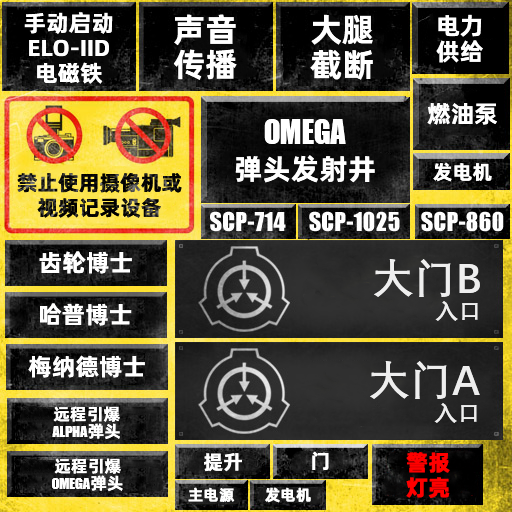
<style>
.page{position:relative;width:512px;height:512px}
.page>*{position:absolute;margin:0}
.t1{font:23px/25px "AlibabaPuHuiTiB";color:#ffffff}
.t2{font:33px/35px "AlibabaPuHuiTiB";color:#ffffff}
.t3{font:24px/26px "AlibabaPuHuiTiB";color:#ffffff}
.t4{font:24px "AlibabaPuHuiTiB";color:#ffffff}
.t5{font:36px/40px "URWImpactW01-Bold";color:#ffffff}
.t6{font:29px/40px "AlibabaPuHuiTiB";color:#ffffff}
.t7{font:21px/25px "AlibabaPuHuiTiB";color:#0c0c0c}
.t8{font:20px "AlibabaPuHuiTiB";color:#ffffff}
.t9{font:42px/42px "DengXian-Bold";color:#eeeeee}
.t10{font:23px/42px "DengXian-Bold";color:#eeeeee}
.t11{font:17px/17px "URWImpactW01-Bold";color:#ffffff}
.t12{font:17px/17px "AlibabaPuHuiTiB";color:#ffffff}
.t13{font:22px/25px "AlibabaPuHuiTiB";color:#ff0000;font-weight:bold}
.t14{font:15px "AlibabaPuHuiTiM";color:#ffffff;font-weight:bold}
</style>
<div class="page">
<p class="t1" style="left:24px;top:12px;width:89px;height:72px;text-align:center">手动启动<br>ELO-IID<br>电磁铁</p>
<p class="t2" style="left:173px;top:14px;width:64px;height:66px">声音<br>传播</p>
<p class="t2" style="left:310px;top:14px;width:63px;height:66px">大腿<br>截断</p>
<p class="t3" style="left:436px;top:14px;width:47px;height:49px">电力<br>供给</p>
<p class="t4" style="left:427px;top:103px;width:70px;height:22px">燃油泵</p>
<p class="t5" style="left:235px;top:119px;width:140px;height:64px;text-align:center">OMEGA<br><span class="t6">弹头发射井</span></p>
<p class="t7" style="left:17px;top:173px;width:165px;height:45px;text-align:center">禁止使用摄像机或<br>视频记录设备</p>
<p class="t8" style="left:433px;top:162px;width:59px;height:20px">发电机</p>
<p class="t4" style="left:39px;top:251px;width:93px;height:23px">齿轮博士</p>
<p class="t9" style="left:374px;top:259px;width:106px;height:62px;text-align:right">大门B<br><span class="t10">入口</span></p>
<p class="t4" style="left:40px;top:303px;width:92px;height:23px">哈普博士</p>
<p class="t4" style="left:28px;top:355px;width:117px;height:23px">梅纳德博士</p>
<p class="t9" style="left:370px;top:361px;width:110px;height:62px;text-align:right">大门A<br><span class="t10">入口</span></p>
<p class="t11" style="left:52px;top:406px;width:68px;height:33px;text-align:center"><span class="t12">远程引爆<br></span>ALPHA<span class="t12">弹头</span></p>
<p class="t11" style="left:52px;top:458px;width:71px;height:33px;text-align:center"><span class="t12">远程引爆<br></span>OMEGA<span class="t12">弹头</span></p>
<p class="t8" style="left:204px;top:453px;width:38px;height:19px">提升</p>
<p class="t8" style="left:312px;top:451px;width:17px;height:20px">门</p>
<p class="t13" style="left:406px;top:452px;width:44px;height:46px">警报<br>灯亮</p>
<p class="t14" style="left:188px;top:487px;width:47px;height:15px">主电源</p>
<p class="t14" style="left:265px;top:487px;width:46px;height:16px">发电机</p>
</div>
